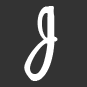
<style>
.page{position:relative;width:87px;height:87px;background:#333333}
.page>*{position:absolute;margin:0}
.t1{font:74px "Billabong";letter-spacing:-0.02em;color:#ffffff}
</style>
<div class="page">
<p class="t1" style="left:24px;top:6px;width:34px;height:75px">J</p>
</div>
